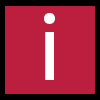
<style>
.page{position:relative;width:100px;height:100px;background:#bb1f3d}
.page>*{position:absolute;margin:0}
.t1{font:100px "MyriadPro-Regular";color:#ffffff}
</style>
<div class="page">
<p class="t1" style="left:44px;top:13px;width:11px;height:67px">i</p>
</div>
